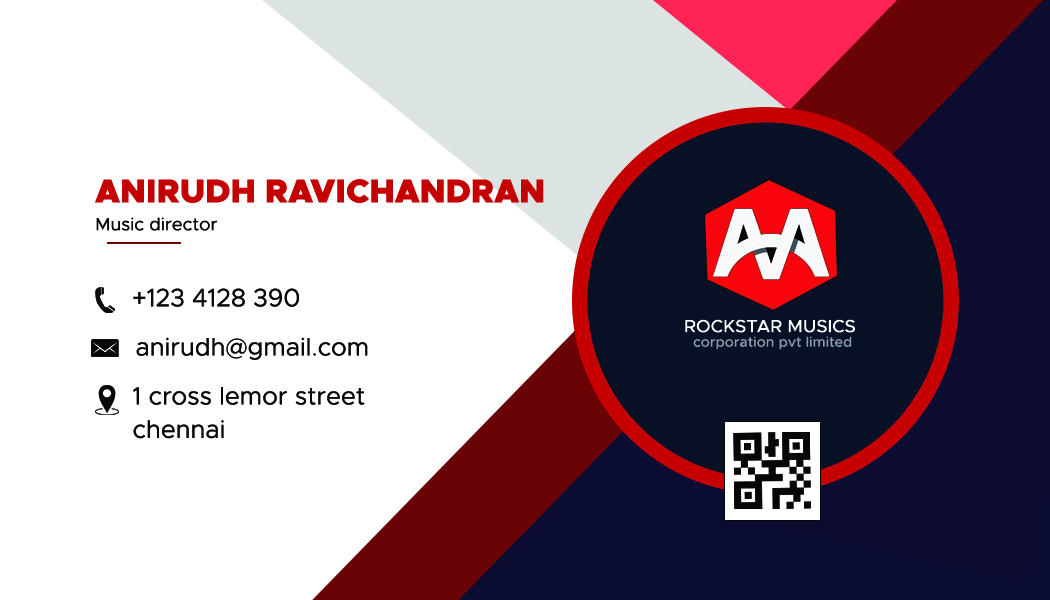
<style>
.page{position:relative;width:1050px;height:600px;background:#ffffff}
.page>*{position:absolute;margin:0}
.t1{font:33.3px "Metropolis-Black";color:#c50000;text-transform:uppercase}
.t2{font:17.8px "Metropolis-Regular";color:#070909}
.t3{font:25.3px "Metropolis-Regular";color:#070909}
.t4{font:17.8px "Metropolis-Medium";color:#feffff;text-transform:uppercase}
.t5{font:25px "Metropolis-Regular";color:#070909}
.t6{font:14.2px "Metropolis-Medium";color:#899fa5}
.t7{font:25px/33.3px "Metropolis-Regular";color:#070909}
</style>
<div class="page">
<p class="t1" style="left:95px;top:179px;width:449px;height:24px">anirudh ravichandran</p>
<p class="t2" style="left:96px;top:217px;width:121px;height:14px">Music director</p>
<p class="t3" style="left:133px;top:288px;width:166px;height:19px">+123 4128 390</p>
<p class="t4" style="left:685px;top:319px;width:170px;height:14px">rockstar musics</p>
<p class="t5" style="left:136px;top:337px;width:232px;height:23px">anirudh@gmail.com</p>
<p class="t6" style="left:693px;top:336px;width:159px;height:14px">corporation pvt limited</p>
<p class="t7" style="left:133px;top:387px;width:232px;height:52px">1 cross lemor street<br>chennai</p>
</div>
